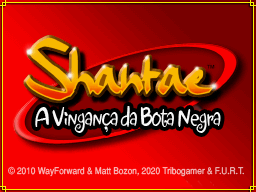
<style>
.page{position:relative;width:256px;height:192px}
.page>*{position:absolute;margin:0}
.t1{font:29.8px "Jewels";letter-spacing:-0.028em;color:#f8f8f8;scale:0.73 1}
.t2{font:9.3px "Helvetica-Normal";color:#f8baba;scale:0.89 1}
</style>
<div class="page">
<p class="t1" style="left:35px;top:106px;width:186px;height:27px">A Vingança da Bota Negra</p>
<p class="t2" style="left:8px;top:166px;width:236px;height:11px">© 2010 WayForward &amp; Matt Bozon, 2020 Tribogamer &amp; F.U.R.T.</p>
</div>
